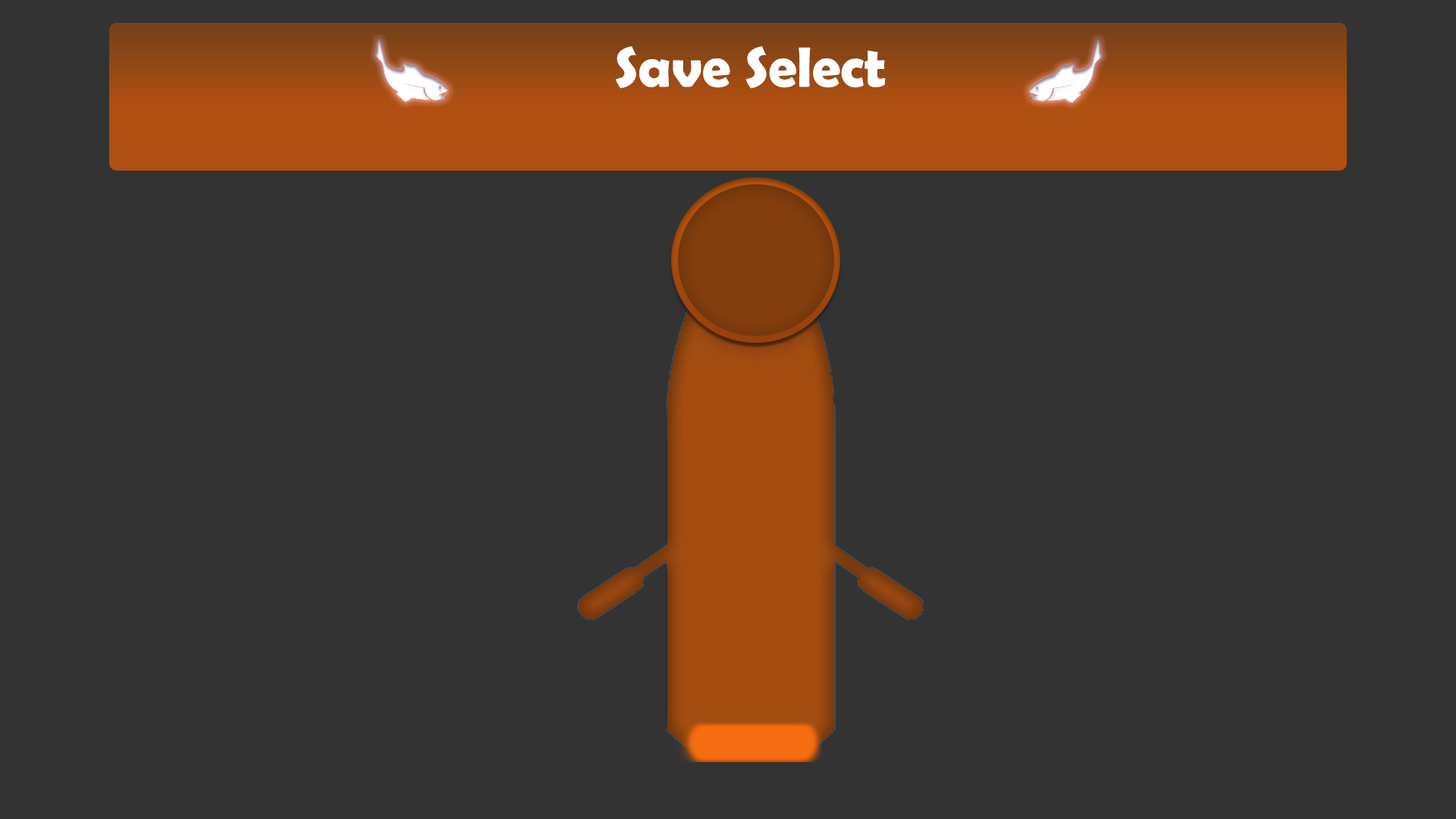
<style>
.page{position:relative;width:1456px;height:819px;background:#333333}
.page>*{position:absolute;margin:0}
.t1{font:56.9px "BerlinSansFBDemi-Bold";color:#ffffff}
</style>
<div class="page">
<p class="t1" style="left:616px;top:46px;width:270px;height:43px">Save Select</p>
</div>
